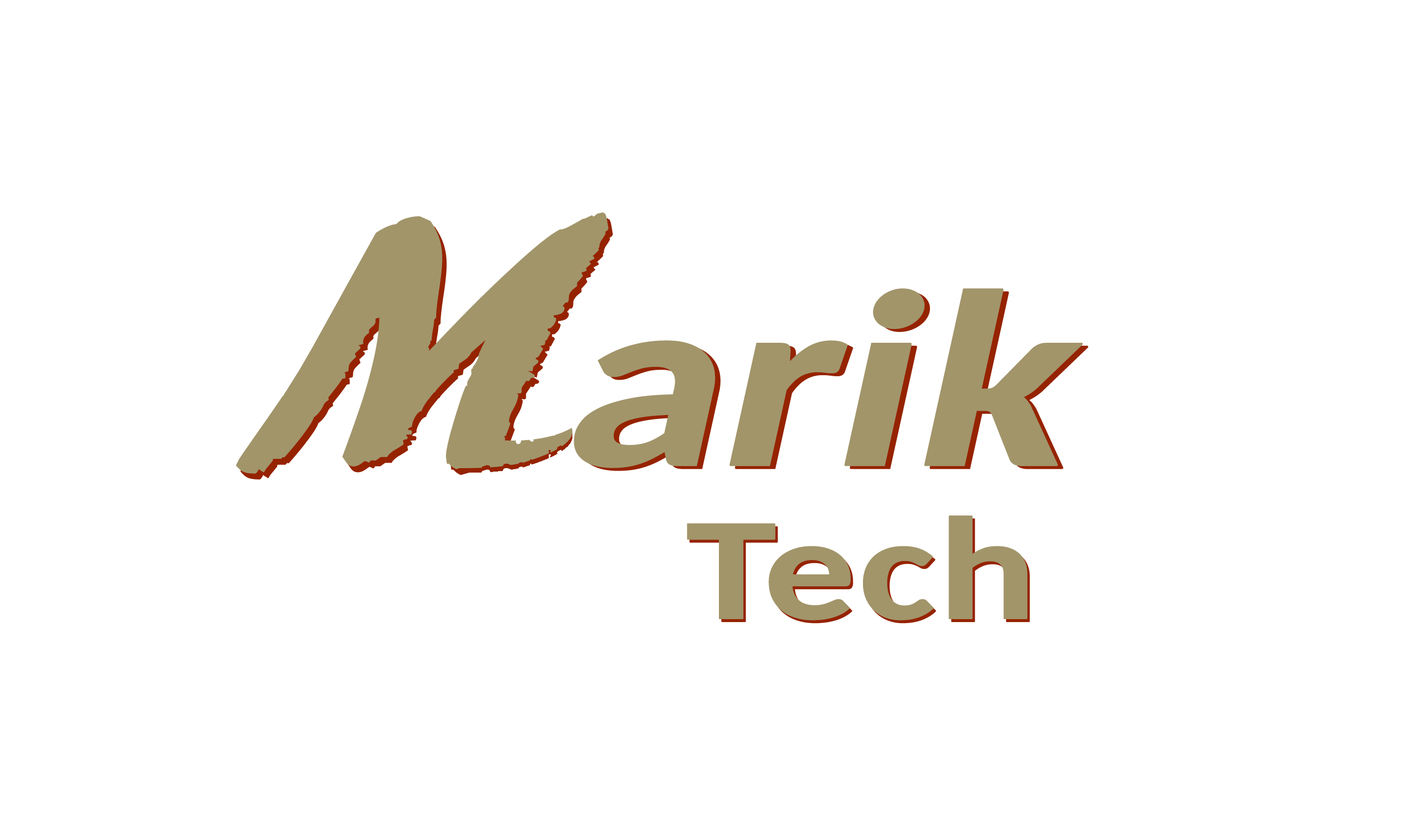
<style>
.page{position:relative;width:1426px;height:836px;background:#ffffff}
.page>*{position:absolute;margin:0}
.t1{font:376px "ARBLANCA";letter-spacing:0.05em;color:#a2956a;text-transform:uppercase;font-weight:bold;scale:1.08 1}
.t2{font:376px "YanoneKaffeesatz-Bold";letter-spacing:0.05em;color:#a2956a;text-transform:uppercase;font-weight:bold;scale:1.08 1}
.t3{font:250.7px "Carlito-Bold";letter-spacing:-0.025em;color:#a2956a;font-weight:bold;font-style:italic;scale:1.25 1}
.t4{font:250.7px "Carlito-Bold";letter-spacing:-0.01em;color:#a2956a;font-weight:bold;font-style:italic;scale:1.25 1}
.t5{font:250.7px "Carlito-Bold";letter-spacing:-0.01em;color:#a2956a;font-weight:bold;scale:1.25 1}
</style>
<div class="page">
<p class="t1" style="left:236px;top:212px;width:373px;height:262px"><span class="t2"><br></span>M</p>
<p class="t1" style="left:240px;top:218px;width:373px;height:262px"><span class="t2"><br></span>M</p>
<p class="t3" style="left:574px;top:288px;width:509px;height:180px"><span class="t4"><br></span>ar<span class="t4">ik</span></p>
<p class="t3" style="left:579px;top:291px;width:510px;height:180px"><span class="t4"><br></span>ar<span class="t4">ik</span></p>
<p class="t5" style="left:687px;top:515px;width:341px;height:106px">Tech</p>
<p class="t5" style="left:690px;top:518px;width:340px;height:106px">Tech</p>
</div>
